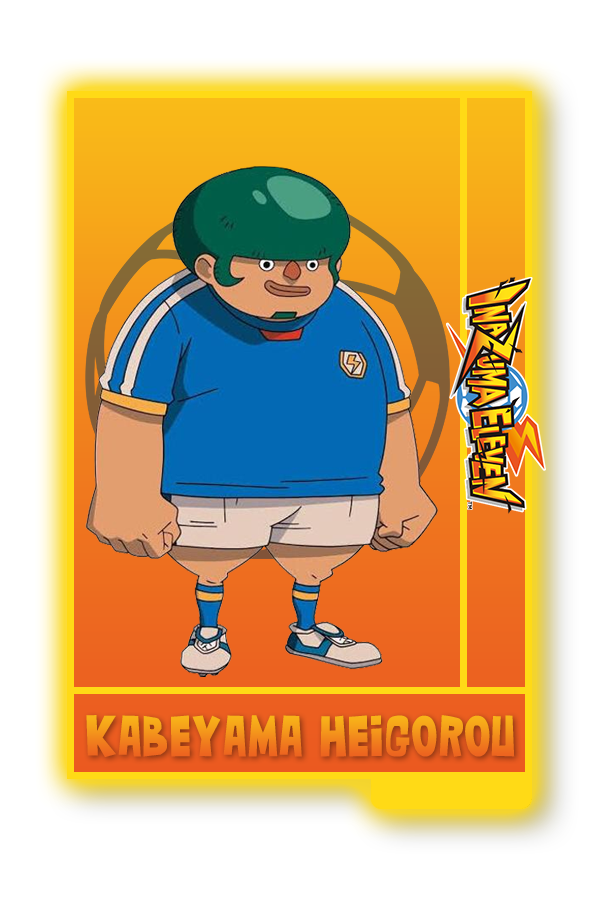
<style>
.page{position:relative;width:600px;height:900px;background:#ffffff}
.page>*{position:absolute;margin:0}
.t1{font:60.3px "TTG-Bold"}
</style>
<div class="page">
<p class="t1" style="left:86px;top:715px;width:429px;height:43px">Kabeyama Heigorou</p>
</div>
